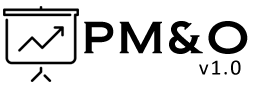
<style>
.page{position:relative;width:256px;height:90px;background:#ffffff}
.page>*{position:absolute;margin:0}
.t1{font:42.6px "Biondi";letter-spacing:0.08em;color:#000000}
.t2{font:21.7px "Calibri";letter-spacing:0.08em;color:#000000}
</style>
<div class="page">
<p class="t1" style="left:84px;top:21px;width:164px;height:33px">PM&amp;O</p>
<p class="t2" style="left:199px;top:60px;width:42px;height:15px">v1.0</p>
</div>
